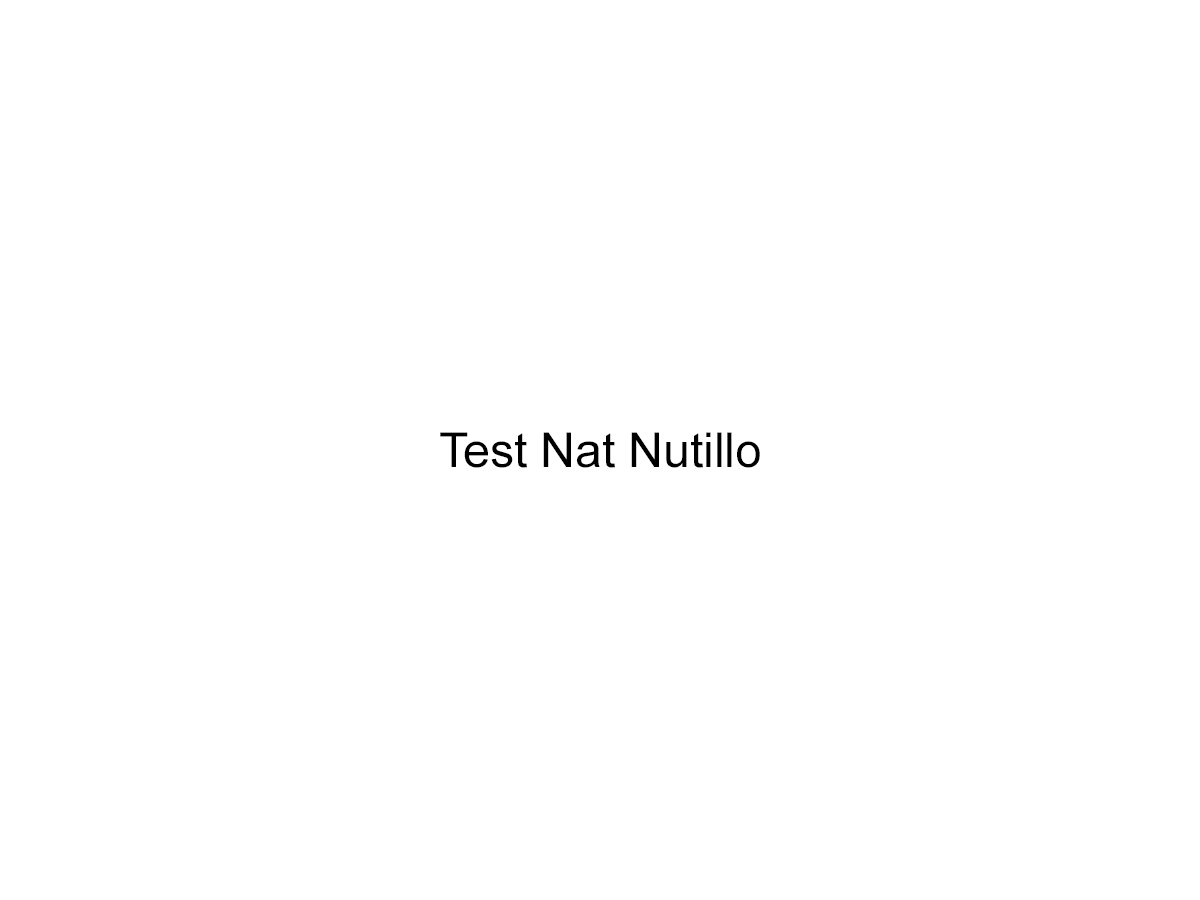
<style>
.page{position:relative;width:1200px;height:900px;background:#ffffff}
.page>*{position:absolute;margin:0}
.t1{font:48px "ArialMT";color:#000000}
</style>
<div class="page">
<p class="t1" style="left:440px;top:432px;width:320px;height:36px">Test Nat Nutillo</p>
</div>
